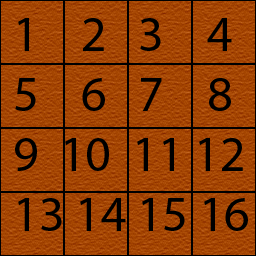
<style>
.page{position:relative;width:256px;height:256px}
.page>*{position:absolute;margin:0}
.t1{font:50px "MyriadPro-Regular";color:#000000}
</style>
<div class="page">
<p class="t1" style="left:15px;top:18px;width:233px;height:213px">1    2   3    4<br>5    6   7    8<br>9  10  11 12<br>13 14 15 16</p>
</div>
